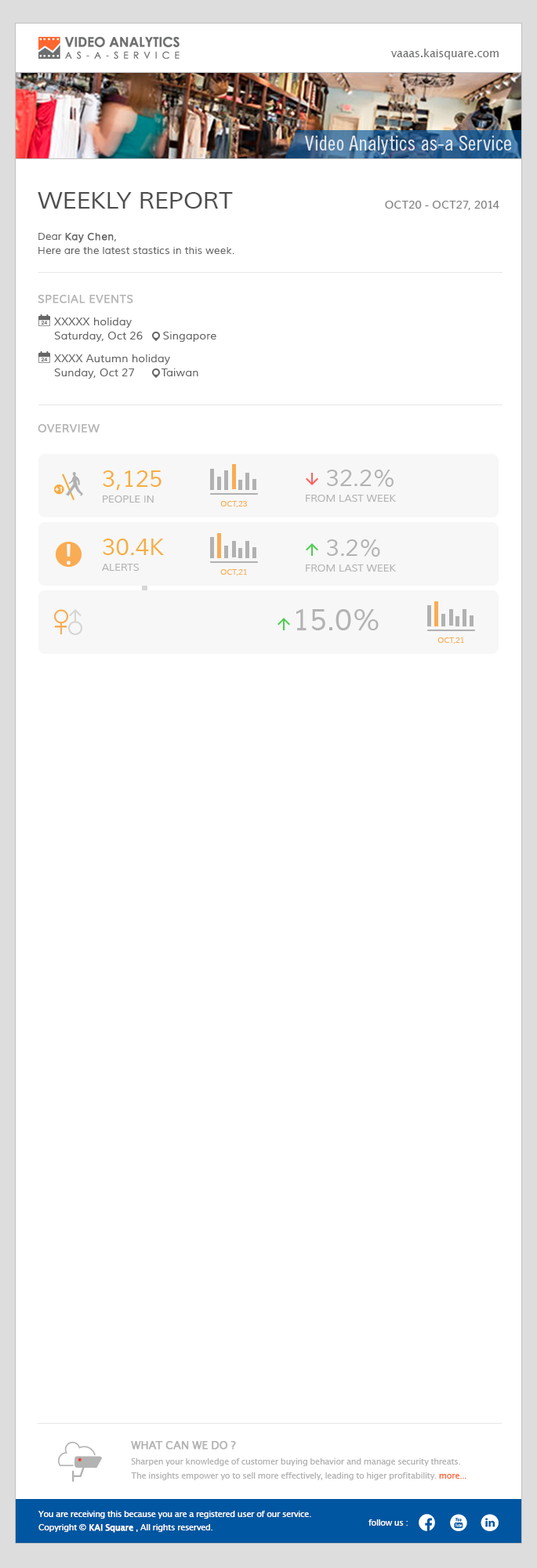
<style>
.page{position:relative;width:537px;height:1568px;background:#ffffff}
.page>*{position:absolute;margin:0}
.t1{font:11px "LucidaSansUnicode";letter-spacing:-0.025em;color:#6d6e70}
.t2{font:20.2px "TradeGothicLTStd-Cn18";letter-spacing:0.01em;color:#e2e7ec;scale:1.03 1}
.t3{font:23.5px "Muli";color:#4d4d4d}
.t4{font:11px "Muli";color:#808080}
.t5{font:10.2px/14.1px "Muli";color:#666666}
.t6{font:10.2px/14.1px "Muli";color:#666666;font-weight:bold}
.t7{font:11px "Muli";color:#b3b3b3;font-weight:bold}
.t8{font:11px/14.1px "Muli";color:#666666}
.t9{font:10.2px/15.7px "Muli";color:#b3b3b3}
.t10{font:23.5px/15.7px "Muli";color:#f6ae40}
.t11{font:23.5px/15.7px "Muli";color:#b3b3b3}
.t12{font:29.8px "Muli";color:#b3b3b3}
.t13{font:11px "LucidaSansUnicode";letter-spacing:-0.05em;color:#b3b3b3;font-weight:bold}
.t14{font:8.6px/14.2px "LucidaSansUnicode";letter-spacing:-0.05em;color:#b3b3b3}
.t15{font:8.6px/14.2px "LucidaSansUnicode";letter-spacing:-0.05em;color:#ff622e}
.t16{font:8.6px "LucidaSansUnicode";letter-spacing:-0.05em;color:#ffffff}
.t17{font:8.6px "LucidaSansUnicode";letter-spacing:-0.05em;color:#ffffff;font-weight:bold}
</style>
<div class="page">
<p class="t1" style="left:391px;top:49px;width:108px;height:11px">vaaas.kaisquare.com</p>
<p class="t2" style="left:305px;top:136px;width:207px;height:18px">Video Analytics as-a Service</p>
<p class="t3" style="left:38px;top:192px;width:195px;height:17px">WEEKLY REPORT</p>
<p class="t4" style="left:385px;top:201px;width:114px;height:9px">OCT20 - OCT27, 2014</p>
<p class="t5" style="left:38px;top:233px;width:196px;height:21px">Dear <span class="t6">Kay Chen</span>,<br>Here are the latest stastics in this week.</p>
<p class="t7" style="left:38px;top:295px;width:95px;height:8px">SPECIAL EVENTS</p>
<p class="t8" style="left:54px;top:318px;width:162px;height:24px">XXXXX holiday<br>Saturday, Oct 26      Singapore</p>
<p class="t8" style="left:54px;top:354px;width:144px;height:25px">XXXX Autumn holiday<br>Sunday, Oct 27        Taiwan</p>
<p class="t7" style="left:38px;top:424px;width:62px;height:9px">OVERVIEW</p>
<p class="t9" style="left:103px;top:470px;width:59px;height:33px"><span class="t10">3,125<br></span>PEOPLE IN</p>
<p class="t9" style="left:306px;top:470px;width:90px;height:32px"><span class="t11">   32.2%<br></span>FROM LAST WEEK</p>
<p class="t9" style="left:102px;top:539px;width:62px;height:32px"><span class="t10">30.4K<br></span>ALERTS</p>
<p class="t9" style="left:306px;top:539px;width:90px;height:33px"><span class="t11">   3.2%<br></span>FROM LAST WEEK</p>
<p class="t12" style="left:296px;top:609px;width:83px;height:21px">15.0%</p>
<p class="t13" style="left:131px;top:1441px;width:105px;height:9px">WHAT CAN WE DO ?</p>
<p class="t14" style="left:131px;top:1458px;width:335px;height:22px">Sharpen your knowledge of customer buying behavior and manage security threats.<br>The insights empower yo to sell more effectively, leading to higer profitability. <span class="t15">more...</span></p>
<p class="t16" style="left:38px;top:1511px;width:273px;height:8px">You are receiving this because you are a registered user of our service.</p>
<p class="t16" style="left:38px;top:1524px;width:174px;height:9px">Copyright ©<span class="t17"> KAI Square</span> , All rights reserved.</p>
<p class="t16" style="left:368px;top:1519px;width:40px;height:7px">follow us :</p>
</div>
